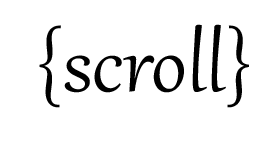
<style>
.page{position:relative;width:278px;height:148px;background:#ffffff}
.page>*{position:absolute;margin:0}
.t1{font:100px "Gabriola";color:#000000}
</style>
<div class="page">
<p class="t1" style="left:39px;top:24px;width:210px;height:84px">{scroll}</p>
</div>
